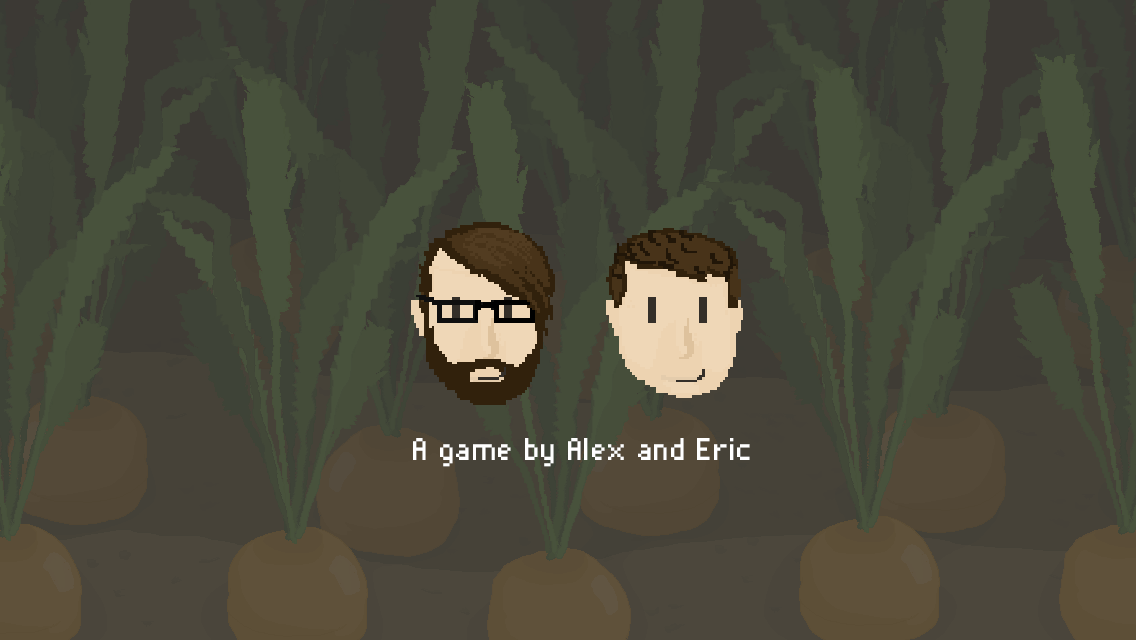
<style>
.page{position:relative;width:1136px;height:640px}
.page>*{position:absolute;margin:0}
.t1{font:40.6px "Pixelade";letter-spacing:0.02em;color:#ffffff}
</style>
<div class="page">
<p class="t1" style="left:413px;top:438px;width:337px;height:29px">A game by Alex and Eric</p>
</div>
